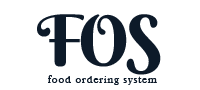
<style>
.page{position:relative;width:200px;height:90px;background:#ffffff}
.page>*{position:absolute;margin:0}
.t1{font:70.9px "BerkshireSwash-Regular";letter-spacing:-0.055em;color:#0d1a29;text-transform:uppercase}
.t2{font:11.3px "BaskOldFace";letter-spacing:0.068em;color:#0d1a29}
</style>
<div class="page">
<p class="t1" style="left:37px;top:14px;width:124px;height:61px">FOS</p>
<p class="t2" style="left:48px;top:75px;width:109px;height:10px">food ordering system</p>
</div>
